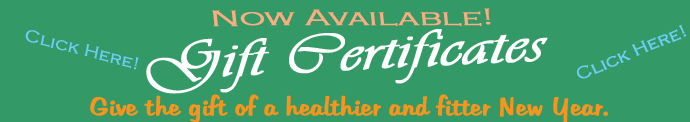
<style>
.page{position:relative;width:690px;height:122px;background:#339966}
.page>*{position:absolute;margin:0}
.t1{font:23.4px "CopperplateGothic-Light";color:#f9ad81;font-weight:bold;scale:1.42 1}
.t2{font:17px "CopperplateGothic-Light";color:#6dcff6;font-weight:bold;scale:1.07 1}
.t3{font:55.2px "Vivaldii";color:#ffffff;font-weight:bold;scale:1.26 1}
.t4{font:25.1px "Tabitha";color:#f7941d;font-weight:bold;scale:1.08 1}
</style>
<div class="page">
<p class="t1" style="left:212px;top:8px;width:279px;height:19px">Now Available!</p>
<p class="t2" style="left:25px;top:30px;width:114px;height:40px;rotate:14deg">Click Here!</p>
<p class="t3" style="left:146px;top:29px;width:402px;height:65px;rotate:-3deg">Gift Certificates</p>
<p class="t2" style="left:577px;top:25px;width:109px;height:54px;rotate:-22deg">Click Here!</p>
<p class="t4" style="left:90px;top:94px;width:518px;height:29px">Give the gift of a healthier and fitter New Year.</p>
</div>
